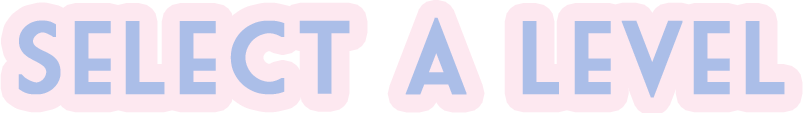
<style>
.page{position:relative;width:803px;height:113px;background:#fde8f0}
.page>*{position:absolute;margin:0}
.t1{font:100px "MarketDeco";letter-spacing:0.04em;color:#abbee8;font-weight:bold}
</style>
<div class="page">
<p class="t1" style="left:18px;top:17px;width:767px;height:81px">Select a Level</p>
</div>
